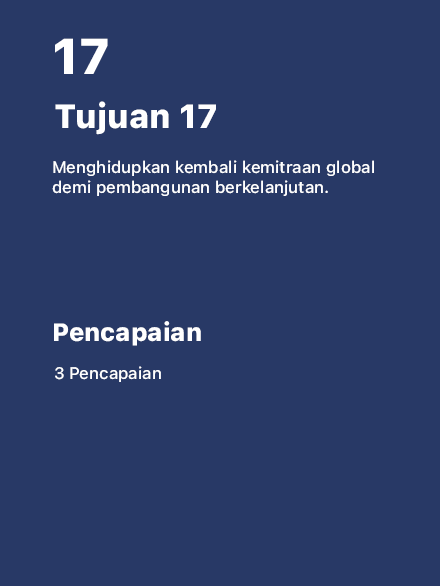
<style>
.page{position:relative;width:440px;height:586px;background:#283966}
.page>*{position:absolute;margin:0}
.t1{font:50px "SFProText-Heavy";color:#ffffff}
.t2{font:33.3px "SFProText-Heavy";color:#ffffff}
.t3{font:16.7px "SFProText-Medium";color:#ffffff}
.t4{font:25px "SFProText-Heavy";color:#ffffff}
</style>
<div class="page">
<p class="t1" style="left:55px;top:38px;width:53px;height:36px">17</p>
<p class="t2" style="left:55px;top:101px;width:161px;height:34px">Tujuan 17</p>
<p class="t3" style="left:52px;top:160px;width:322px;height:36px">Menghidupkan kembali kemitraan global demi pembangunan berkelanjutan.</p>
<p class="t4" style="left:54px;top:321px;width:147px;height:25px">Pencapaian</p>
<p class="t3" style="left:55px;top:366px;width:106px;height:16px">3 Pencapaian</p>
</div>
